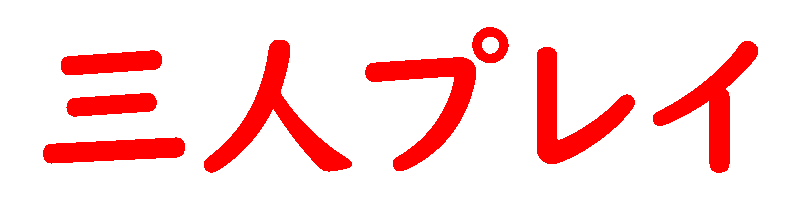
<style>
.page{position:relative;width:800px;height:200px;background:#ffffff}
.page>*{position:absolute;margin:0}
.t1{font:161.6px "UDDigiKyokashoNK-B";color:#ff0000}
</style>
<div class="page">
<p class="t1" style="left:43px;top:27px;width:715px;height:146px">三人プレイ</p>
</div>
